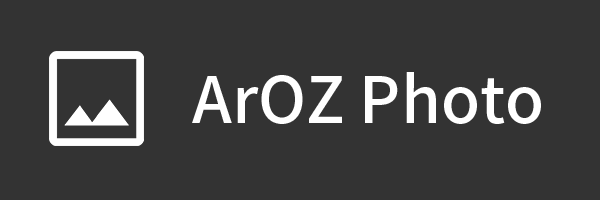
<style>
.page{position:relative;width:600px;height:200px;background:#333333}
.page>*{position:absolute;margin:0}
.t1{font:64px "NotoSansTC-Medium";color:#ffffff}
</style>
<div class="page">
<p class="t1" style="left:192px;top:72px;width:349px;height:52px">ArOZ Photo</p>
</div>
